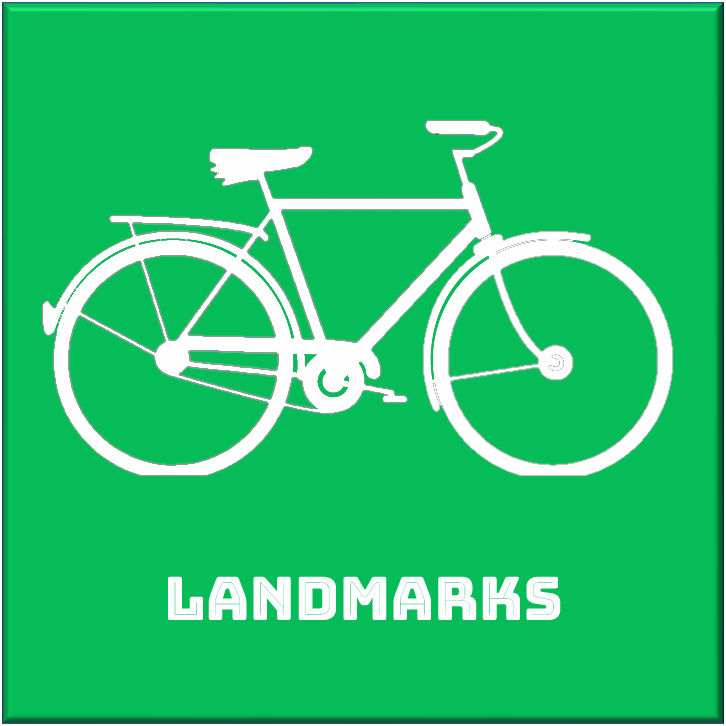
<style>
.page{position:relative;width:726px;height:726px;background:#05bc58}
.page>*{position:absolute;margin:0}
.t1{font:60px "BungeeInline-Regular";color:#fefefe}
</style>
<div class="page">
<p class="t1" style="left:168px;top:576px;width:393px;height:44px">LANDMARKS</p>
</div>
